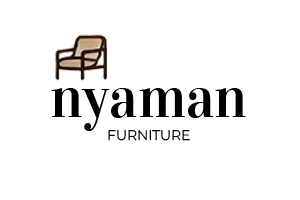
<style>
.page{position:relative;width:300px;height:200px;background:#ffffff}
.page>*{position:absolute;margin:0}
.t1{font:58px "Vidaloka-Regular";color:#000000}
.t2{font:13.9px "MontserratRoman-Light";color:#000000}
</style>
<div class="page">
<p class="t1" style="left:51px;top:88px;width:195px;height:43px">nyaman</p>
<p class="t2" style="left:108px;top:130px;width:82px;height:11px">FURNITURE</p>
</div>
